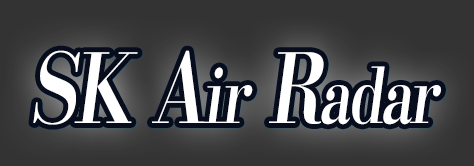
<style>
.page{position:relative;width:474px;height:166px;background:#333333}
.page>*{position:absolute;margin:0}
.t1{font:96px "KochoStd-Heavy";letter-spacing:-0.04em;color:#ffffff;font-style:italic;scale:0.75 1}
.t2{font:76.8px "KochoStd-Heavy";letter-spacing:-0.04em;color:#ffffff;font-style:italic;scale:0.75 1}
</style>
<div class="page">
<p class="t1" style="left:33px;top:50px;width:408px;height:75px">SK A<span class="t2">ir</span> R<span class="t2">adar</span></p>
</div>
